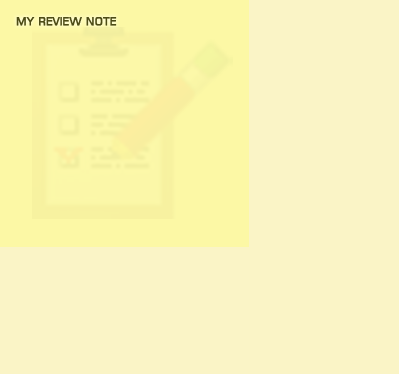
<style>
.page{position:relative;width:399px;height:374px;background:#faf4c6}
.page>*{position:absolute;margin:0}
.t1{font:12px "IrisNormal";color:#4d4c15;text-transform:uppercase;font-weight:bold}
</style>
<div class="page">
<p class="t1" style="left:16px;top:17px;width:101px;height:9px">My Review Note</p>
</div>
